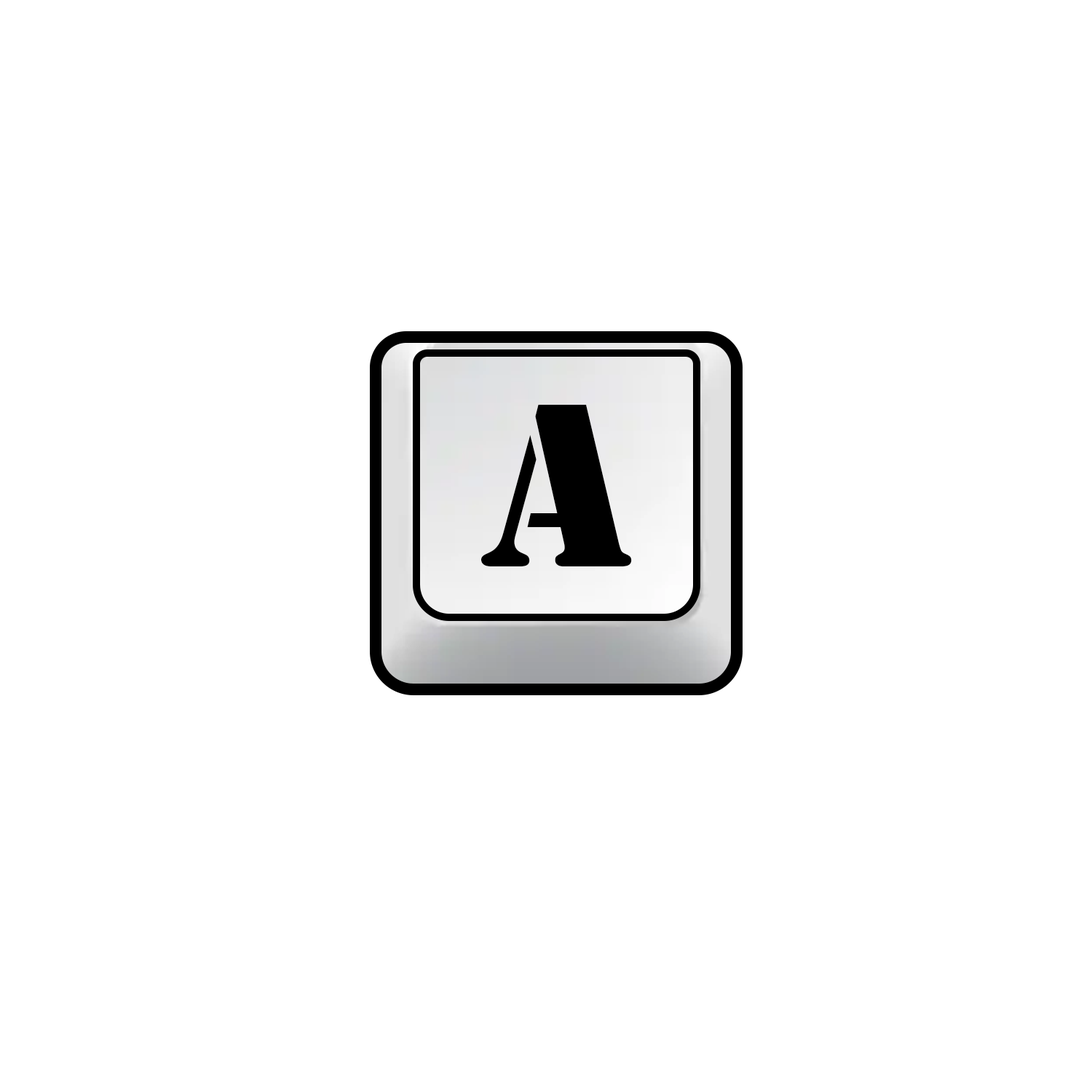
<style>
.page{position:relative;width:1092px;height:1092px;background:#ffffff}
.page>*{position:absolute;margin:0}
.t1{font:242.7px "Stencil";color:#000000}
</style>
<div class="page">
<p class="t1" style="left:481px;top:405px;width:151px;height:161px">A</p>
</div>
